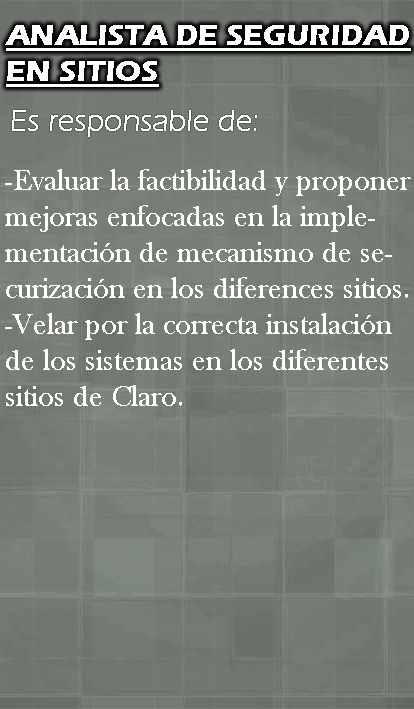
<style>
.page{position:relative;width:414px;height:709px}
.page>*{position:absolute;margin:0}
.t1{font:30px "ErasITC-Bold";color:#ffffff;text-transform:uppercase;text-decoration:underline}
.t2{font:30px "BaskOldFace";color:#ffffff}
</style>
<div class="page">
<p class="t1" style="left:5px;top:25px;width:406px;height:62px">analista de seguridad<br>en sitios</p>
<p class="t2" style="left:5px;top:169px;width:406px;height:237px">-Evaluar la factibilidad y proponer<br>mejoras enfocadas en la imple-<br>mentación de mecanismo de se-<br>curización en los diferences sitios.<br>-Velar por la correcta instalación<br>de los sistemas en los diferentes<br>sitios de Claro.</p>
</div>
